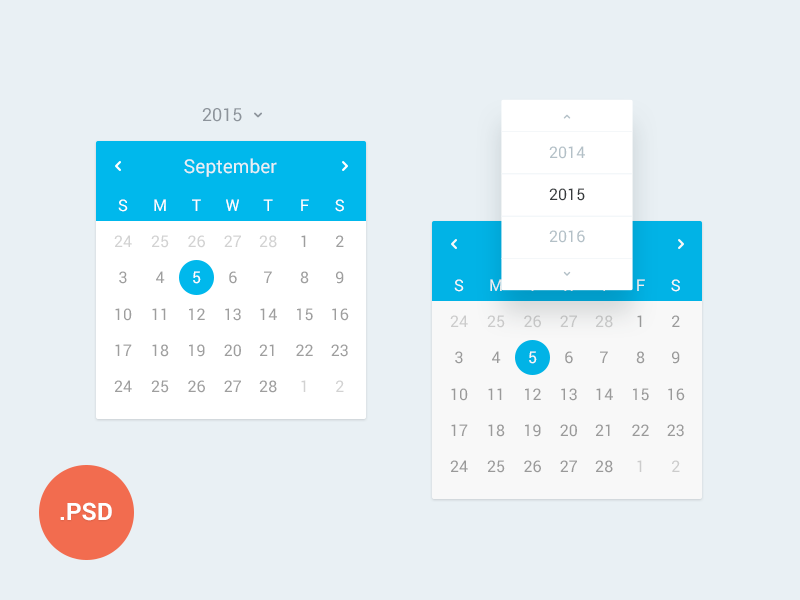
<style>
.page{position:relative;width:800px;height:600px;background:#e9f0f4}
.page>*{position:absolute;margin:0}
.t1{font:18px "Roboto-Regular";color:#8d949b}
.t2{font:16px "Roboto-Regular";color:#b3c0c7}
.t3{font:19px "Roboto-Regular";color:#e9f0f4}
.t4{font:16px "Roboto-Regular";color:#383b3e}
.t5{font:16px/36.3px "Roboto-Regular";color:#9e9e9e}
.t6{font:16px/36.3px "Roboto-Regular";color:#ffffff}
.t7{font:16px "Roboto-Regular";color:#d2d2d2}
.t8{font:16px "Roboto-Regular";color:#cccccc}
.t9{font:16px "Roboto-Regular";color:#cacaca}
.t10{font:16px "Roboto-Regular";color:#c5c5c6}
.t11{font:16px "Roboto-Regular";color:#c4c5c5}
.t12{font:16px "Roboto-Regular";color:#c7c7c7}
.t13{font:24px "Roboto-Bold";color:#ffffff;text-transform:uppercase}
</style>
<div class="page">
<p class="t1" style="left:202px;top:108px;width:40px;height:14px">2015</p>
<p class="t2" style="left:549px;top:146px;width:36px;height:13px">2014</p>
<p class="t3" style="left:184px;top:158px;width:93px;height:19px">September</p>
<p class="t4" style="left:549px;top:188px;width:36px;height:13px">2015</p>
<p class="t5" style="left:114px;top:199px;width:18px;height:193px;text-align:center"><span class="t6">S<br><br></span>3<br>10<br>17<br>24</p>
<p class="t5" style="left:151px;top:199px;width:18px;height:194px;text-align:center"><span class="t6">M<br><br></span>4<br>11<br>18<br>25</p>
<p class="t5" style="left:188px;top:199px;width:17px;height:194px;text-align:center"><span class="t6">T<br><br>5<br></span>12<br>19<br>26</p>
<p class="t5" style="left:224px;top:199px;width:17px;height:193px;text-align:center"><span class="t6">W<br><br></span>6<br>13<br>20<br>27</p>
<p class="t5" style="left:259px;top:199px;width:18px;height:194px;text-align:center"><span class="t6">T<br><br></span>7<br>14<br>21<br>28</p>
<p class="t5" style="left:296px;top:199px;width:17px;height:157px;text-align:center"><span class="t6">F<br></span>1<br>8<br>15<br>22</p>
<p class="t5" style="left:331px;top:199px;width:18px;height:158px;text-align:center"><span class="t6">S<br></span>2<br>9<br>16<br>23</p>
<p class="t2" style="left:549px;top:230px;width:36px;height:13px">2016</p>
<p class="t7" style="left:114px;top:235px;width:18px;height:12px">24</p>
<p class="t7" style="left:151px;top:235px;width:18px;height:13px">25</p>
<p class="t7" style="left:188px;top:235px;width:17px;height:13px">26</p>
<p class="t7" style="left:224px;top:235px;width:17px;height:12px">27</p>
<p class="t7" style="left:259px;top:235px;width:18px;height:13px">28</p>
<p class="t5" style="left:450px;top:279px;width:18px;height:193px;text-align:center"><span class="t6">S<br><br></span>3<br>10<br>17<br>24</p>
<p class="t5" style="left:487px;top:279px;width:18px;height:194px;text-align:center"><span class="t6">M<br><br></span>4<br>11<br>18<br>25</p>
<p class="t5" style="left:524px;top:279px;width:17px;height:194px;text-align:center"><span class="t6">T<br><br>5<br></span>12<br>19<br>26</p>
<p class="t5" style="left:560px;top:279px;width:17px;height:193px;text-align:center"><span class="t6">W<br><br></span>6<br>13<br>20<br>27</p>
<p class="t5" style="left:595px;top:279px;width:18px;height:194px;text-align:center"><span class="t6">T<br><br></span>7<br>14<br>21<br>28</p>
<p class="t5" style="left:632px;top:279px;width:17px;height:157px;text-align:center"><span class="t6">F<br></span>1<br>8<br>15<br>22</p>
<p class="t5" style="left:667px;top:279px;width:18px;height:158px;text-align:center"><span class="t6">S<br></span>2<br>9<br>16<br>23</p>
<p class="t8" style="left:450px;top:315px;width:18px;height:12px">24</p>
<p class="t9" style="left:487px;top:315px;width:18px;height:13px">25</p>
<p class="t10" style="left:524px;top:315px;width:17px;height:13px">26</p>
<p class="t11" style="left:560px;top:315px;width:17px;height:12px">27</p>
<p class="t12" style="left:595px;top:315px;width:18px;height:13px">28</p>
<p class="t7" style="left:301px;top:380px;width:5px;height:12px">1</p>
<p class="t7" style="left:336px;top:380px;width:8px;height:12px">2</p>
<p class="t8" style="left:637px;top:460px;width:5px;height:12px">1</p>
<p class="t8" style="left:672px;top:460px;width:8px;height:12px">2</p>
<p class="t13" style="left:60px;top:502px;width:52px;height:19px">.psd</p>
</div>
